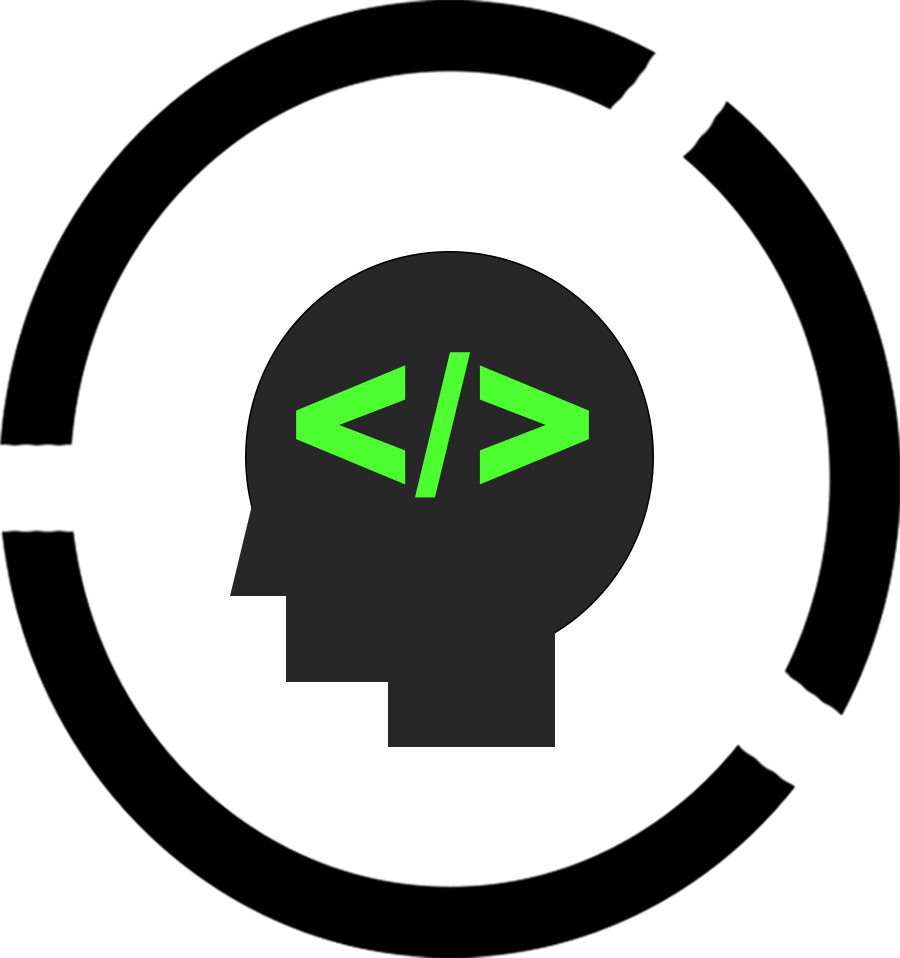
<style>
.page{position:relative;width:900px;height:958px;background:#ffffff}
.page>*{position:absolute;margin:0}
.t1{font:195.6px "Arial-Black";color:#4dff30}
</style>
<div class="page">
<p class="t1" style="left:296px;top:352px;width:293px;height:146px">&lt;/&gt;</p>
</div>
